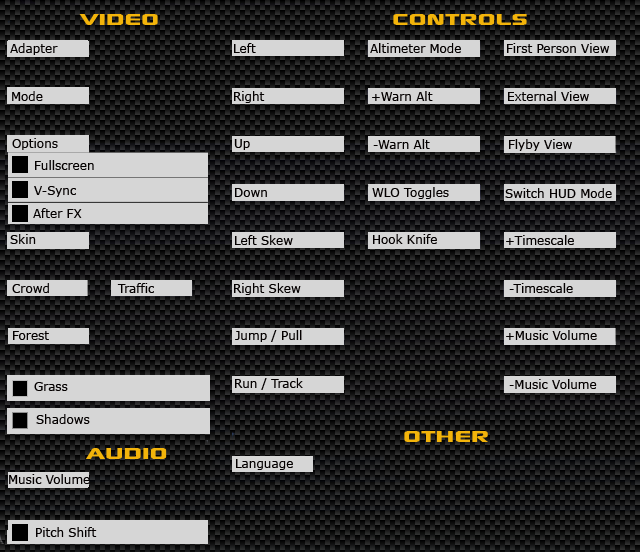
<style>
.page{position:relative;width:640px;height:552px}
.page>*{position:absolute;margin:0}
.t1{font:30px "Xscale";color:#f3b40a}
.t2{font:12px "Verdana";color:#040000}
</style>
<div class="page">
<p class="t1" style="left:79px;top:14px;width:79px;height:11px">Video</p>
<p class="t1" style="left:393px;top:14px;width:134px;height:11px">Controls</p>
<p class="t2" style="left:10px;top:43px;width:48px;height:12px">Adapter</p>
<p class="t2" style="left:234px;top:43px;width:22px;height:10px">Left</p>
<p class="t2" style="left:370px;top:43px;width:91px;height:10px">Altimeter Mode</p>
<p class="t2" style="left:507px;top:43px;width:103px;height:10px">First Person View</p>
<p class="t2" style="left:12px;top:91px;width:31px;height:10px">Mode</p>
<p class="t2" style="left:234px;top:91px;width:31px;height:12px">Right</p>
<p class="t2" style="left:372px;top:91px;width:61px;height:10px">+Warn Alt</p>
<p class="t2" style="left:508px;top:91px;width:81px;height:10px">External View</p>
<p class="t2" style="left:12px;top:138px;width:46px;height:12px">Options</p>
<p class="t2" style="left:234px;top:139px;width:16px;height:11px">Up</p>
<p class="t2" style="left:373px;top:139px;width:57px;height:10px">-Warn Alt</p>
<p class="t2" style="left:509px;top:139px;width:63px;height:12px">Flyby View</p>
<p class="t2" style="left:35px;top:160px;width:59px;height:10px">Fullscreen</p>
<p class="t2" style="left:34px;top:186px;width:42px;height:11px">V-Sync</p>
<p class="t2" style="left:235px;top:188px;width:32px;height:9px">Down</p>
<p class="t2" style="left:372px;top:187px;width:77px;height:12px">WLO Toggles</p>
<p class="t2" style="left:505px;top:188px;width:107px;height:10px">Switch HUD Mode</p>
<p class="t2" style="left:33px;top:208px;width:49px;height:10px">After FX</p>
<p class="t2" style="left:10px;top:234px;width:26px;height:10px">Skin</p>
<p class="t2" style="left:235px;top:235px;width:58px;height:10px">Left Skew</p>
<p class="t2" style="left:373px;top:234px;width:64px;height:10px">Hook Knife</p>
<p class="t2" style="left:506px;top:235px;width:68px;height:10px">+Timescale</p>
<p class="t2" style="left:12px;top:283px;width:37px;height:10px">Crowd</p>
<p class="t2" style="left:117px;top:283px;width:37px;height:10px">Traffic</p>
<p class="t2" style="left:234px;top:283px;width:67px;height:12px">Right Skew</p>
<p class="t2" style="left:509px;top:283px;width:64px;height:10px">-Timescale</p>
<p class="t2" style="left:13px;top:331px;width:36px;height:9px">Forest</p>
<p class="t2" style="left:235px;top:330px;width:67px;height:12px">Jump / Pull</p>
<p class="t2" style="left:506px;top:330px;width:91px;height:10px">+Music Volume</p>
<p class="t2" style="left:34px;top:382px;width:34px;height:9px">Grass</p>
<p class="t2" style="left:235px;top:378px;width:68px;height:12px">Run / Track</p>
<p class="t2" style="left:509px;top:379px;width:88px;height:10px">-Music Volume</p>
<p class="t2" style="left:36px;top:414px;width:54px;height:10px">Shadows</p>
<p class="t1" style="left:404px;top:431px;width:84px;height:11px">Other</p>
<p class="t1" style="left:86px;top:448px;width:81px;height:11px">Audio</p>
<p class="t2" style="left:236px;top:459px;width:57px;height:11px">Language</p>
<p class="t2" style="left:9px;top:474px;width:81px;height:10px">Music Volume</p>
<p class="t2" style="left:36px;top:527px;width:61px;height:10px">Pitch Shift</p>
</div>
